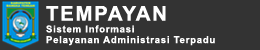
<style>
.page{position:relative;width:260px;height:50px;background:#333333}
.page>*{position:absolute;margin:0}
.t1{font:20.5px "Arial-BoldMT";letter-spacing:0.075em;color:#ffffff}
.t2{font:9.6px "Arial-BoldMT";letter-spacing:0.075em;color:#ffffff}
</style>
<div class="page">
<p class="t1" style="left:46px;top:6px;width:120px;height:15px">TEMPAYAN</p>
<p class="t2" style="left:46px;top:25px;width:88px;height:8px">Sistem Informasi</p>
<p class="t2" style="left:46px;top:36px;width:169px;height:10px">Pelayanan Administrasi Terpadu</p>
</div>
